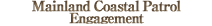
<style>
.page{position:relative;width:212px;height:26px;background:#ffffff}
.page>*{position:absolute;margin:0}
.t1{font:14px/12px "RyuminPro-ExBold";letter-spacing:-0.08em;color:#69553d;font-weight:bold}
.t2{font:11.2px/12px "RyuminPro-ExBold";letter-spacing:-0.08em;color:#69553d;font-weight:bold;scale:1.25 1}
</style>
<div class="page">
<p class="t1" style="left:32px;top:0px;width:149px;height:24px;text-align:center">Mainland Coastal Patrol<br>En<span class="t2">g</span>a<span class="t2">g</span>ement</p>
</div>
